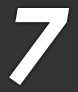
<style>
.page{position:relative;width:78px;height:92px;background:#333333}
.page>*{position:absolute;margin:0}
.t1{font:109.6px "ProductSans-BoldItalic";color:#ffffff}
</style>
<div class="page">
<p class="t1" style="left:9px;top:8px;width:60px;height:77px">7</p>
</div>
